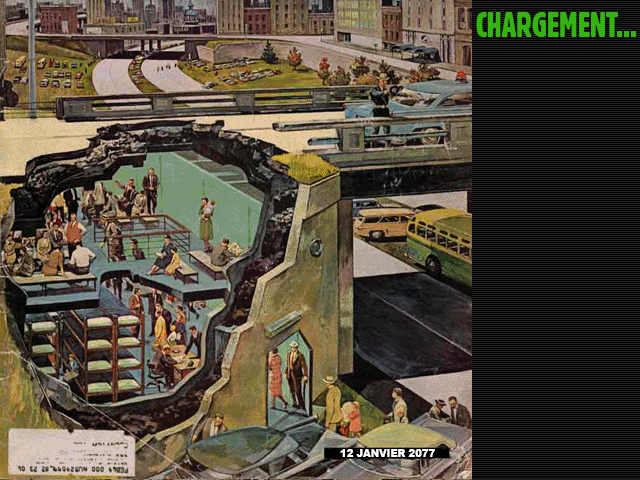
<style>
.page{position:relative;width:640px;height:480px}
.page>*{position:absolute;margin:0}
.t1{font:35.2px "Gothic821CondensedBT-Regular";color:#34b410;scale:0.91 1}
.t2{font:10.8px "Arial-Black";color:#ffffff;scale:0.92 1}
</style>
<div class="page">
<p class="t1" style="left:476px;top:12px;width:161px;height:25px">CHARGEMENT...</p>
<p class="t2" style="left:340px;top:449px;width:95px;height:8px">12 JANVIER 2077</p>
</div>
